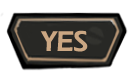
<style>
.page{position:relative;width:131px;height:80px;background:#ffffff}
.page>*{position:absolute;margin:0}
.t1{font:30px "037-CAI978";color:#cba783}
</style>
<div class="page">
<p class="t1" style="left:40px;top:30px;width:48px;height:22px">YES</p>
</div>
